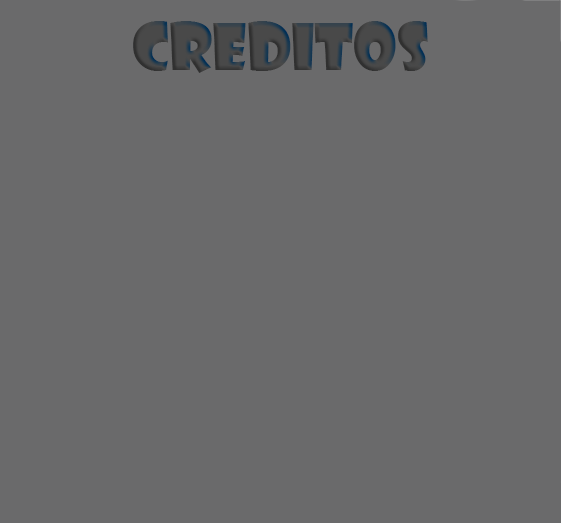
<style>
.page{position:relative;width:561px;height:523px;background:#6a6a6b}
.page>*{position:absolute;margin:0}
.t1{font:62.5px "ShowcardGothic-Reg";color:#494949}
</style>
<div class="page">
<p class="t1" style="left:133px;top:21px;width:295px;height:52px">Creditos</p>
</div>
